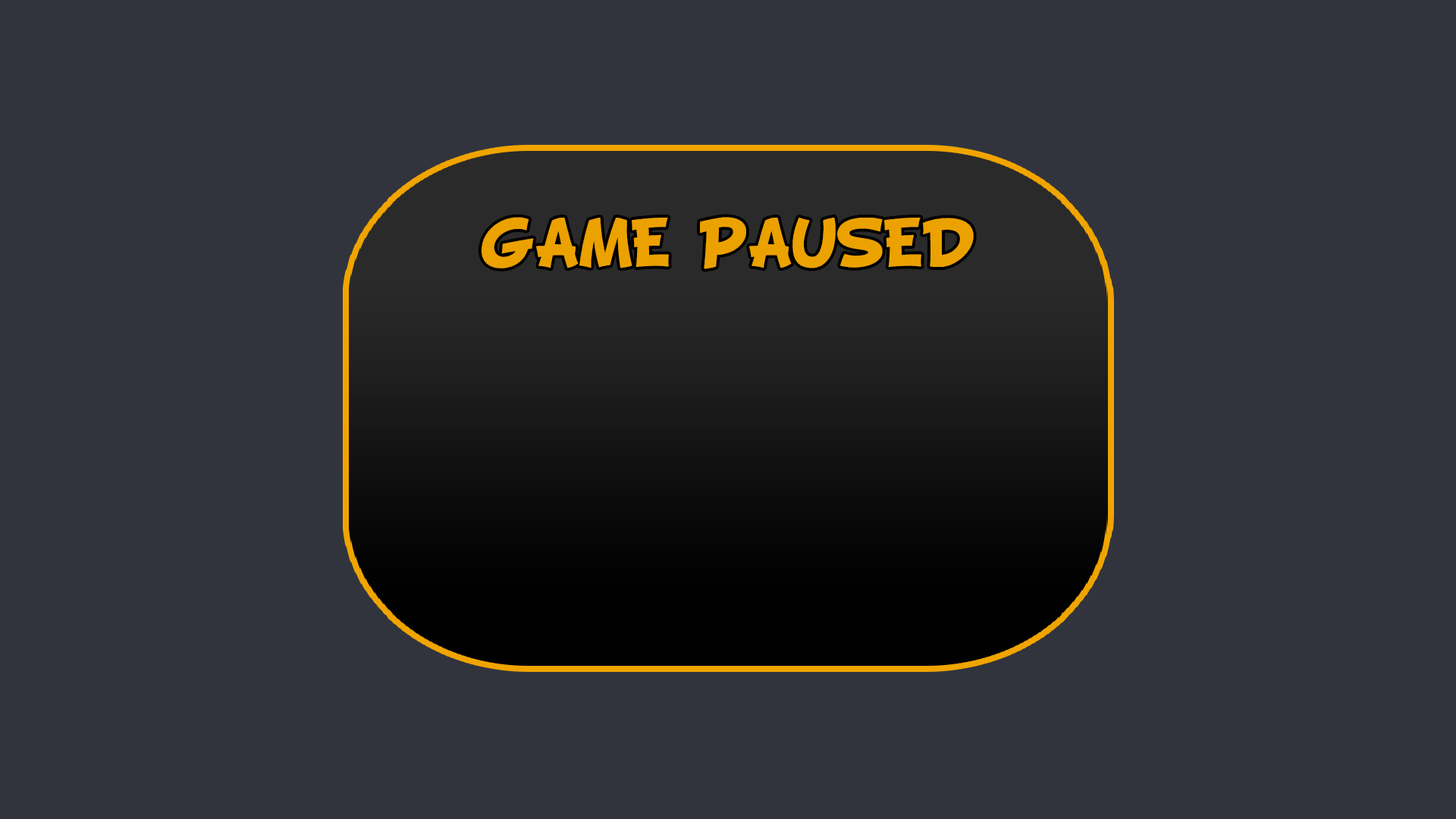
<style>
.page{position:relative;width:1456px;height:819px;background:#31343d}
.page>*{position:absolute;margin:0}
.t1{font:54.6px "BDCartoonShout";color:#eba100}
</style>
<div class="page">
<p class="t1" style="left:482px;top:217px;width:492px;height:52px">GAME PAUSED</p>
</div>
